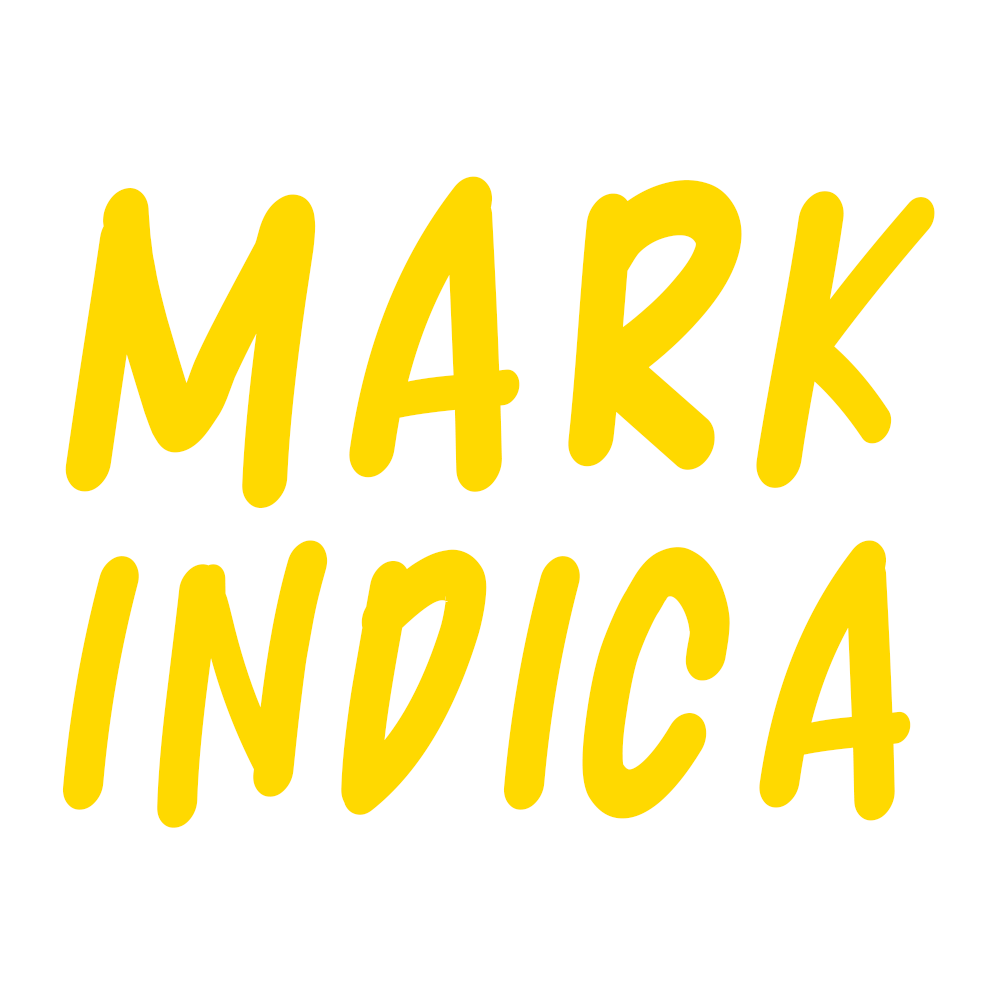
<style>
.page{position:relative;width:1000px;height:1000px;background:#ffffff}
.page>*{position:absolute;margin:0}
.t1{font:349.9px/330.3px "BestMarker";letter-spacing:0.04em;color:#ffd900;text-transform:uppercase;font-style:italic;scale:0.81 1}
.t2{font:393.8px/330.3px "BestMarker";letter-spacing:0.04em;color:#ffd900;text-transform:uppercase;font-style:italic;scale:0.81 1}
</style>
<div class="page">
<p class="t1" style="left:62px;top:176px;width:873px;height:652px;text-align:center"><span class="t2">Mark<br></span>Indica</p>
</div>
